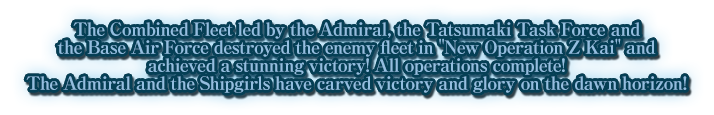
<style>
.page{position:relative;width:714px;height:115px}
.page>*{position:absolute;margin:0}
.t1{font:18px/18px "RyuminPro-ExBold";letter-spacing:-0.04em;color:#93bee0}
</style>
<div class="page">
<p class="t1" style="left:26px;top:22px;width:661px;height:71px;text-align:center">The Combined Fleet led by the Admiral, the Tatsumaki Task Force and<br>the Base Air Force destroyed the enemy fleet in "New Operation Z Kai" and<br>achieved a stunning victory! All operations complete!<br>The Admiral and the Shipgirls have carved victory and glory on the dawn horizon!</p>
</div>
